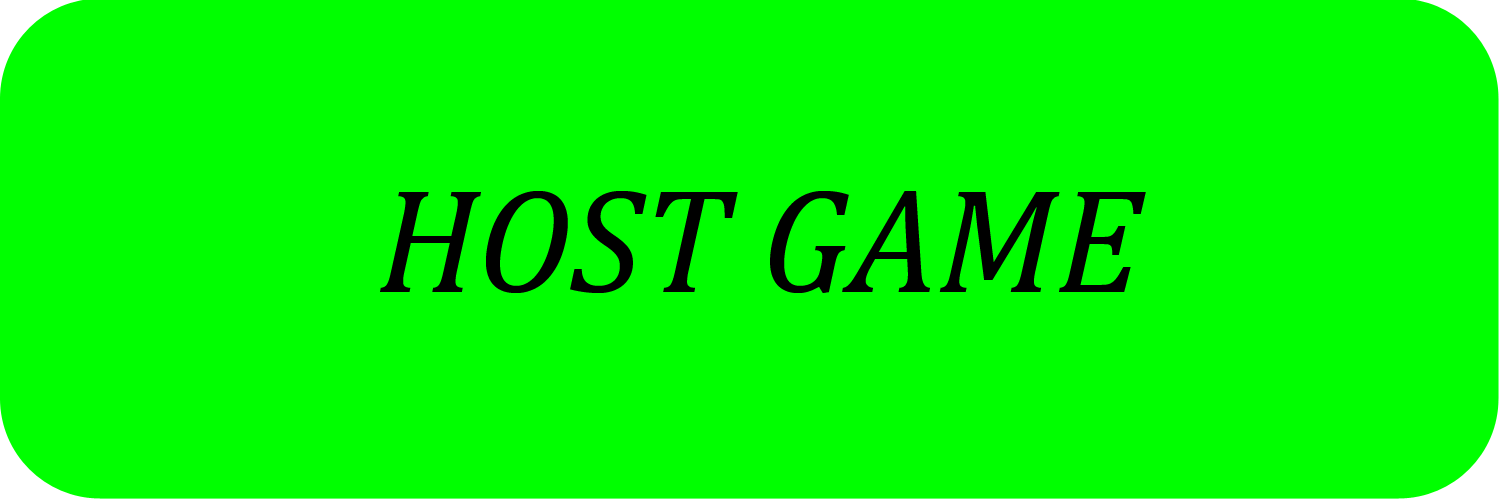
<style>
.page{position:relative;width:1500px;height:500px;background:#00ff00}
.page>*{position:absolute;margin:0}
.t1{font:150px "Cambria-Italic";color:#000000}
</style>
<div class="page">
<p class="t1" style="left:380px;top:191px;width:766px;height:102px">HOST GAME</p>
</div>
